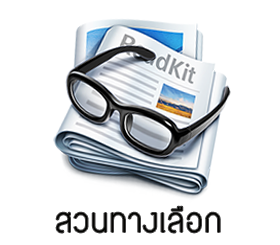
<style>
.page{position:relative;width:280px;height:245px;background:#ffffff}
.page>*{position:absolute;margin:0}
.t1{font:30px "BangnaNew";color:#020200}
</style>
<div class="page">
<p class="t1" style="left:56px;top:206px;width:164px;height:27px">สวนทางเลือก</p>
</div>
